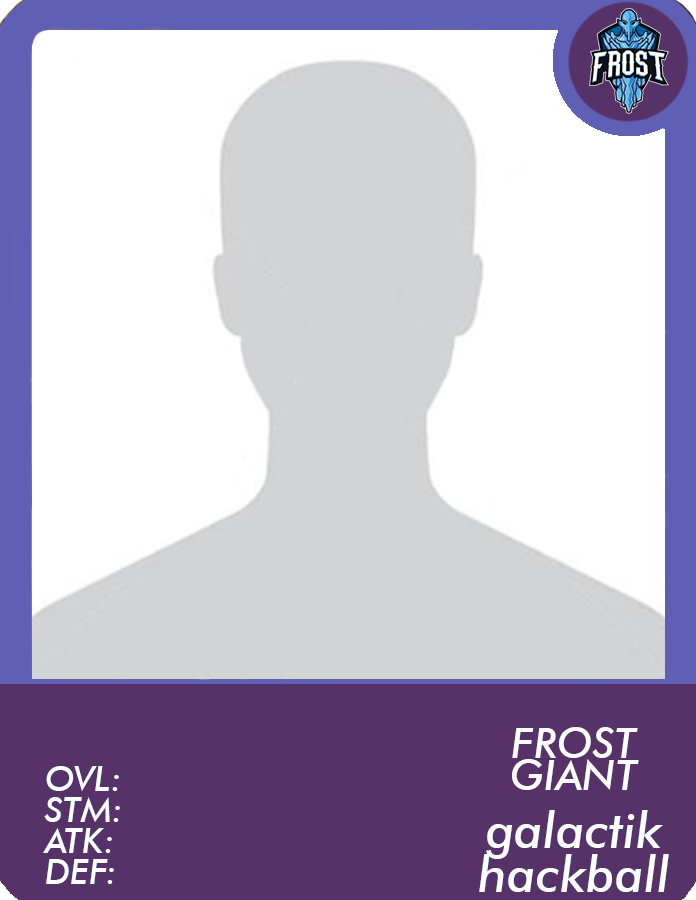
<style>
.page{position:relative;width:696px;height:900px;background:#ffffff}
.page>*{position:absolute;margin:0}
.t1{font:42px "FuturaBT-MediumItalic";color:#ffffff}
.t2{font:35px/31px "FuturaBT-MediumItalic";color:#ffffff}
.t3{font:50.3px/44.7px "FuturaBT-MediumItalic";color:#ffffff}
</style>
<div class="page">
<p class="t1" style="left:512px;top:727px;width:127px;height:63px">FROST GIANT</p>
<p class="t2" style="left:43px;top:766px;width:77px;height:118px">OVL:<br>STM:<br>ATK:<br>DEF:</p>
<p class="t3" style="left:479px;top:810px;width:190px;height:82px;text-align:center">galactik<br>hackball</p>
</div>
